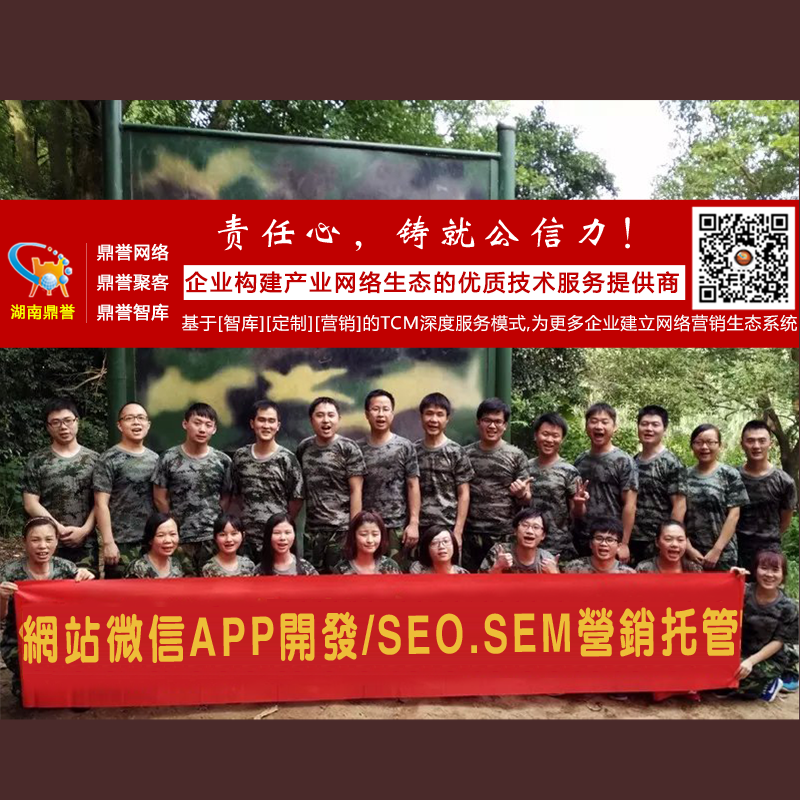
<style>
.page{position:relative;width:800px;height:800px;background:#4a2a2a}
.page>*{position:absolute;margin:0}
.t1{font:38.2px "FZWBJW--GB1-0";letter-spacing:0.18em;color:#ffffff}
.t2{font:17px/30px "MicrosoftYaHei";letter-spacing:0.05em;color:#ffffff;font-weight:bold}
.t3{font:22px "MicrosoftYaHei";letter-spacing:0.1em;color:#c00000;font-weight:bold}
.t4{font:15.1px "MicrosoftYaHei";letter-spacing:0.05em;color:#f6ff00;font-weight:bold}
.t5{font:17px "MicrosoftYaHei";letter-spacing:0.05em;color:#ffffff}
.t6{font:53.2px "CTCuYuanSF";letter-spacing:0.1em;color:#edbe38;scale:0.71 1}
</style>
<div class="page">
<p class="t1" style="left:217px;top:214px;width:413px;height:37px">责任心，铸就公信力！</p>
<p class="t2" style="left:97px;top:243px;width:72px;height:78px;text-align:justify">鼎誉网络<br>鼎誉聚客<br>鼎誉智库</p>
<p class="t3" style="left:185px;top:271px;width:494px;height:23px">企业构建产业网络生态的优质技术服务提供商</p>
<p class="t4" style="left:10px;top:304px;width:65px;height:16px">湖南鼎誉</p>
<p class="t5" style="left:182px;top:314px;width:615px;height:18px">基于[智库][定制][营销]的TCM深度服务模式,为更多企业建立网络营销生态系统</p>
<p class="t6" style="left:23px;top:607px;width:715px;height:57px;rotate:-1deg">网站微信APP开发/SEO.SEM营销托管</p>
</div>
